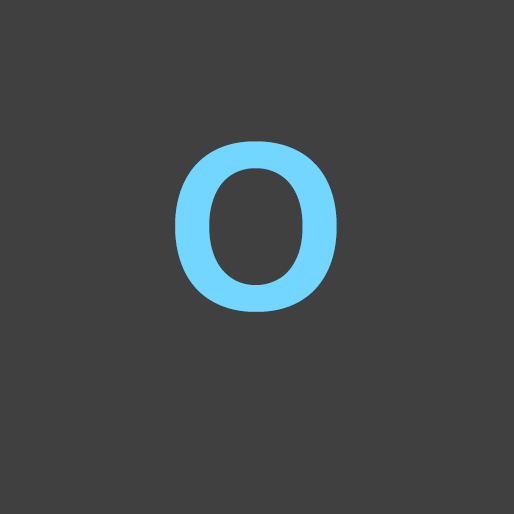
<style>
.page{position:relative;width:514px;height:514px;background:#404040}
.page>*{position:absolute;margin:0}
.t1{font:230px "ArialRoundedMTBold";color:#73d6ff}
</style>
<div class="page">
<p class="t1" style="left:175px;top:141px;width:162px;height:171px">O</p>
</div>
